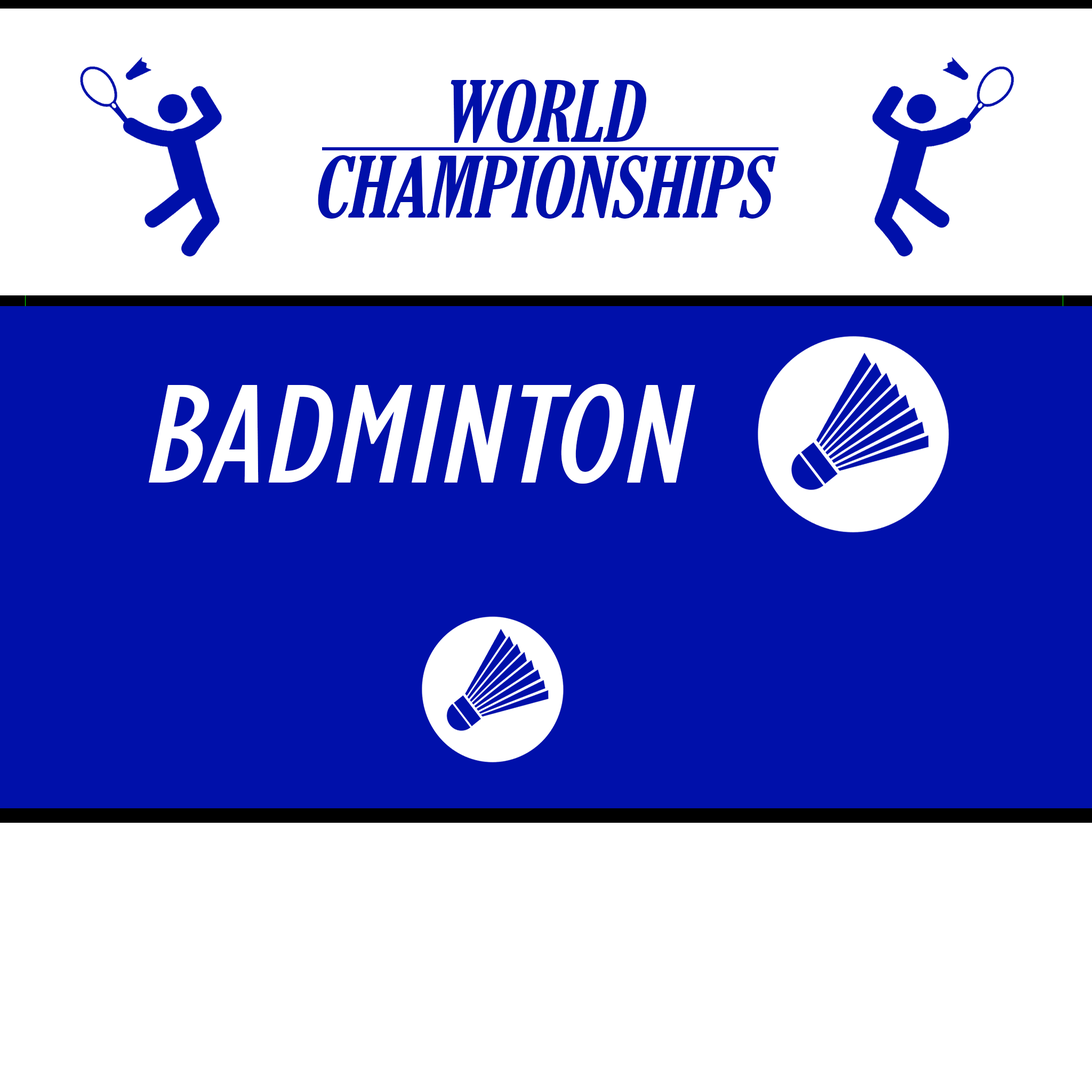
<style>
.page{position:relative;width:1092px;height:1092px;background:#ffffff}
.page>*{position:absolute;margin:0}
.t1{font:81.5px/75.6px "GloucesterMT-ExtraCondensed";color:#0010aa;font-style:italic;scale:1.12 1}
.t2{font:146.1px "GillSansMT-Condensed";color:#ffffff;font-style:italic;scale:1.12 1}
</style>
<div class="page">
<p class="t1" style="left:318px;top:79px;width:458px;height:140px;text-align:center">WORLD<br>CHAMPIONSHIPS</p>
<p class="t2" style="left:149px;top:384px;width:546px;height:100px">BADMINTON</p>
</div>
